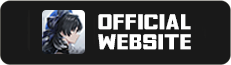
<style>
.page{position:relative;width:231px;height:65px;background:#191919}
.page>*{position:absolute;margin:0}
.t1{font:22.1px "Fyodor-Bold";letter-spacing:0.06em;color:#ffffff;scale:1.24 1}
</style>
<div class="page">
<p class="t1" style="left:98px;top:14px;width:93px;height:16px">OfficiaL</p>
<p class="t1" style="left:98px;top:34px;width:93px;height:16px">Website</p>
</div>
